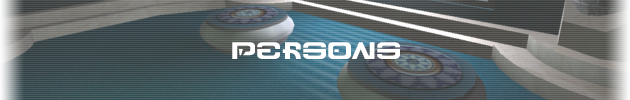
<style>
.page{position:relative;width:630px;height:100px}
.page>*{position:absolute;margin:0}
.t1{font:24px "Engli-Besh";color:#ffffff}
</style>
<div class="page">
<p class="t1" style="left:232px;top:42px;width:168px;height:17px">Persons</p>
</div>
